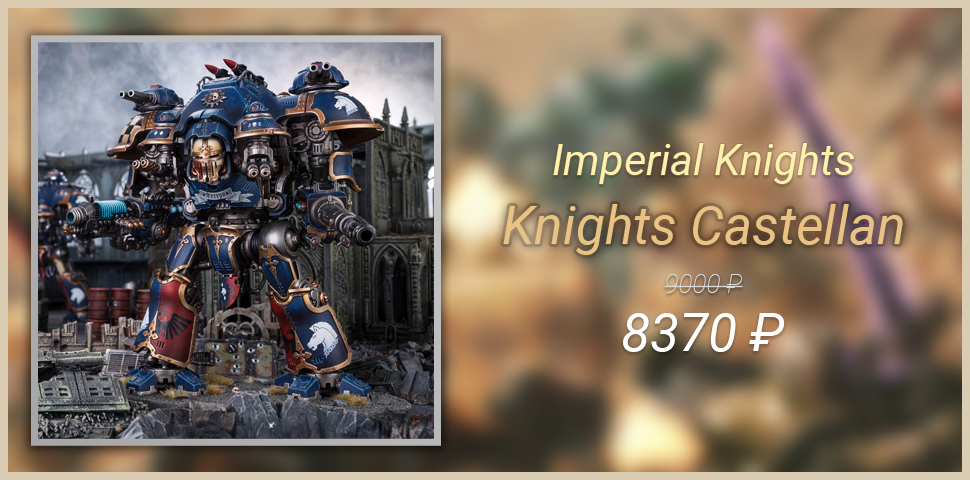
<style>
.page{position:relative;width:970px;height:480px}
.page>*{position:absolute;margin:0}
.t1{font:43px "Roboto-Italic";color:#fff0aa}
.t2{font:53px "Roboto-Italic";color:#e8c383}
.t3{font:26px "Roboto-ThinItalic";color:#d8d8d8}
.t4{font:53px "Roboto-Italic";color:#ffffff}
</style>
<div class="page">
<p class="t1" style="left:553px;top:143px;width:301px;height:41px">Imperial Knights</p>
<p class="t2" style="left:503px;top:204px;width:400px;height:51px">Knights Castellan</p>
<p class="t3" style="left:664px;top:274px;width:79px;height:19px">9000 ₽</p>
<p class="t4" style="left:623px;top:313px;width:162px;height:39px">8370 ₽</p>
</div>
